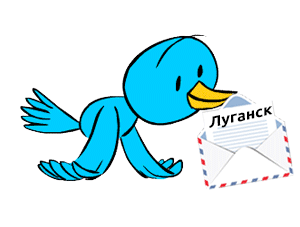
<style>
.page{position:relative;width:300px;height:227px;background:#ffffff}
.page>*{position:absolute;margin:0}
.t1{font:15px "Ubuntu-Bold";color:#000000;font-style:italic;scale:1.08 1}
</style>
<div class="page">
<p class="t1" style="left:209px;top:106px;width:64px;height:22px;rotate:-12deg">Луганск</p>
</div>
